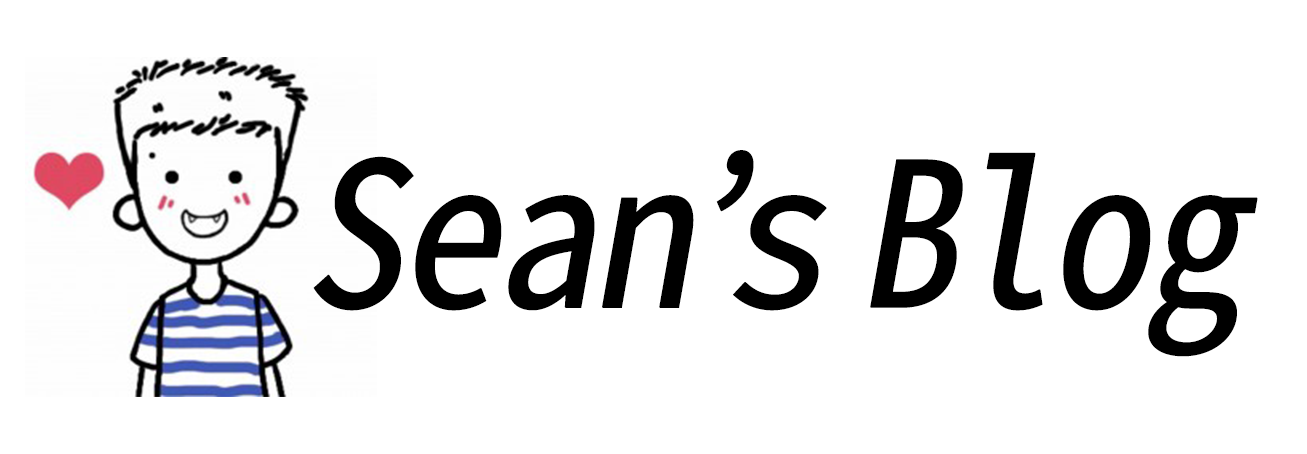
<style>
.page{position:relative;width:1307px;height:454px;background:#ffffff}
.page>*{position:absolute;margin:0}
.t1{font:200px "SourceHanSansCN-Regular";letter-spacing:-0.05em;color:#000000;font-weight:bold;font-style:italic}
</style>
<div class="page">
<p class="t1" style="left:313px;top:150px;width:945px;height:207px">Sean’s Blog</p>
</div>
